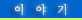
<style>
.page{position:relative;width:82px;height:20px;background:#0066cc}
.page>*{position:absolute;margin:0}
.t1{font:12px "BatangChe";scale:0.9 1}
</style>
<div class="page">
<p class="t1" style="left:15px;top:4px;width:51px;height:12px">이  야  기</p>
</div>
